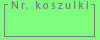
<style>
.page{position:relative;width:100px;height:40px;background:#7dff7d}
.page>*{position:absolute;margin:0}
.t1{font:11.2px "MyriadPro-Regular";letter-spacing:0.2em;color:#7d7d7d}
</style>
<div class="page">
<p class="t1" style="left:11px;top:1px;width:77px;height:8px">Nr. koszulki</p>
</div>
